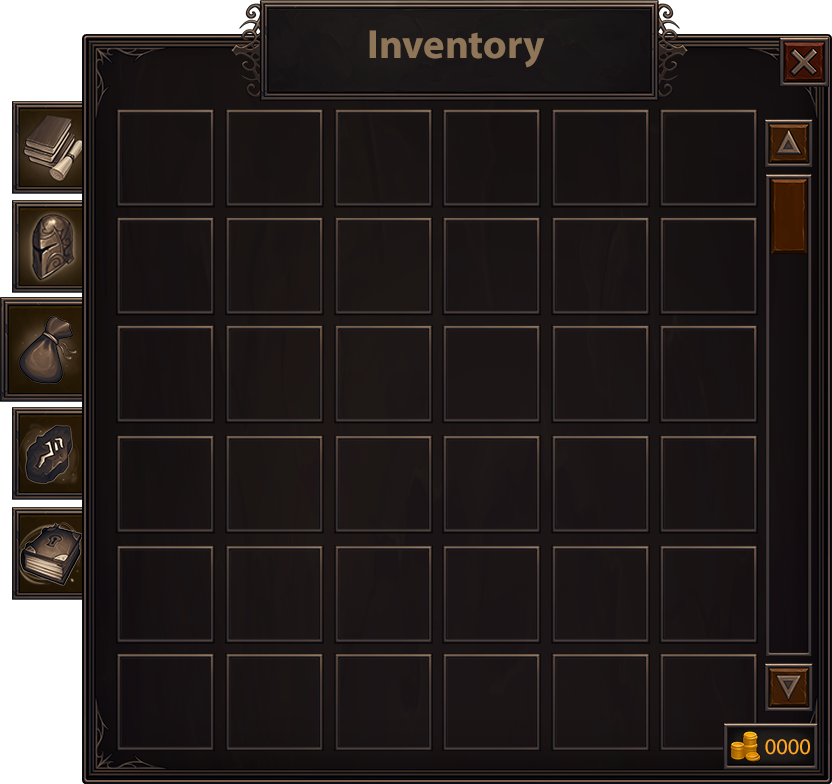
<style>
.page{position:relative;width:832px;height:784px}
.page>*{position:absolute;margin:0}
.t1{font:40.9px "MyriadPro-Bold";color:#907659}
.t2{font:22.5px "MyriadPro-Regular";color:#ffa822}
</style>
<div class="page">
<p class="t1" style="left:369px;top:30px;width:176px;height:38px">Inventory</p>
<p class="t2" style="left:765px;top:739px;width:45px;height:16px">0000</p>
</div>
